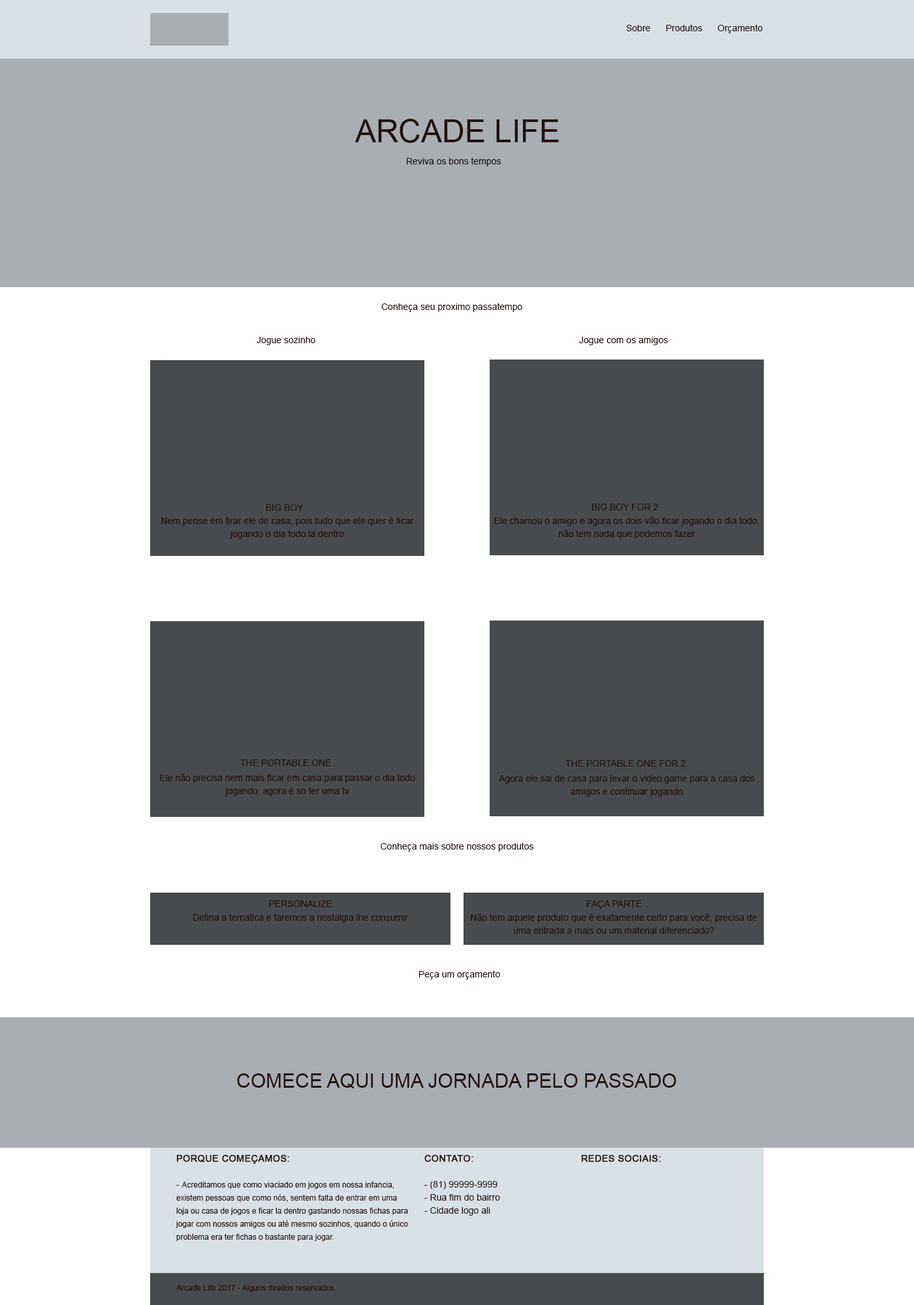
<style>
.page{position:relative;width:914px;height:1305px;background:#ffffff}
.page>*{position:absolute;margin:0}
.t1{font:9.1px "ArialMT";color:#23120d}
.t2{font:31.3px "ArialMT";color:#23120d}
.t3{font:9.1px/13.1px "ArialMT";color:#23120d}
.t4{font:19.6px "ArialMT";color:#23120d}
.t5{font:7.8px/13.1px "ArialMT";color:#23120d}
.t6{font:9.1px/13.1px "ArialMT";letter-spacing:0.025em;color:#23120d;font-weight:bold}
.t7{font:9.1px "ArialMT";letter-spacing:0.025em;color:#23120d;font-weight:bold}
.t8{font:7.8px "ArialMT";color:#23120d}
</style>
<div class="page">
<p class="t1" style="left:626px;top:24px;width:136px;height:9px">Sobre      Produtos      Orçamento</p>
<p class="t2" style="left:354px;top:119px;width:205px;height:24px">ARCADE LIFE</p>
<p class="t1" style="left:407px;top:157px;width:94px;height:9px">Reviva os bons tempos</p>
<p class="t1" style="left:381px;top:303px;width:141px;height:9px">Conheça seu proximo passatempo</p>
<p class="t1" style="left:256px;top:337px;width:59px;height:8px">Jogue sozinho</p>
<p class="t1" style="left:579px;top:337px;width:89px;height:8px">Jogue com os amigos</p>
<p class="t1" style="left:266px;top:504px;width:37px;height:7px">BIG BOY</p>
<p class="t1" style="left:591px;top:504px;width:67px;height:6px">BIG BOY FOR 2</p>
<p class="t3" style="left:161px;top:517px;width:253px;height:22px;text-align:center">Nem pense em tirar ele de casa, pois tudo que ele quer é ficar jogando o dia todo la dentro</p>
<p class="t3" style="left:494px;top:517px;width:265px;height:22px;text-align:center">Ele chamou o amigo e agora os dois vão ficar jogando o dia todo, não tem nada que podemos fazer</p>
<p class="t1" style="left:240px;top:760px;width:91px;height:6px">THE PORTABLE ONE</p>
<p class="t1" style="left:565px;top:760px;width:120px;height:7px">THE PORTABLE ONE FOR 2</p>
<p class="t3" style="left:160px;top:774px;width:255px;height:22px;text-align:center">Ele não precisa nem mais ficar em casa para passar o dia todo jogando, agora é so ter uma tv</p>
<p class="t3" style="left:499px;top:775px;width:255px;height:22px;text-align:center">Agora ele sai de casa para levar o video game para a casa dos amigos e continuar jogando</p>
<p class="t1" style="left:380px;top:842px;width:154px;height:10px">Conheça mais sobre nossos produtos</p>
<p class="t1" style="left:269px;top:901px;width:63px;height:6px">PERSONALIZE</p>
<p class="t1" style="left:587px;top:901px;width:54px;height:8px">FAÇA PARTE</p>
<p class="t1" style="left:193px;top:914px;width:216px;height:9px">Defina a tematica e faremos a nostalgia lhe consumir</p>
<p class="t3" style="left:471px;top:914px;width:285px;height:20px;text-align:center">Não tem aquele produto que é exatamente certo para você, precisa de uma entrada a mais ou um material diferenciado?</p>
<p class="t1" style="left:419px;top:970px;width:81px;height:10px">Peça um orçamento</p>
<p class="t4" style="left:237px;top:1074px;width:439px;height:15px">COMECE AQUI UMA JORNADA PELO PASSADO</p>
<p class="t5" style="left:176px;top:1155px;width:232px;height:86px"><span class="t6">PORQUE COMEÇAMOS:<br></span><span class="t3"><br>- </span>Acreditamos que como viaciado em jogos em nossa infancia, existem pessoas que como nós, sentem falta de entrar em uma loja ou casa de jogos e ficar la dentro gastando nossas fichas para jogar com nossos amigos ou até mesmo sozinhos, quando o único problema era ter fichas o bastante para jogar.</p>
<p class="t3" style="left:424px;top:1155px;width:76px;height:61px"><span class="t6">CONTATO:<br><br></span>- (81) 99999-9999<br>- Rua fim do bairro<br>- Cidade logo ali</p>
<p class="t7" style="left:581px;top:1155px;width:79px;height:7px">REDES SOCIAIS:</p>
<p class="t8" style="left:176px;top:1285px;width:160px;height:7px">Arcade Life 2017 - Alguns direitos reservados.</p>
</div>
